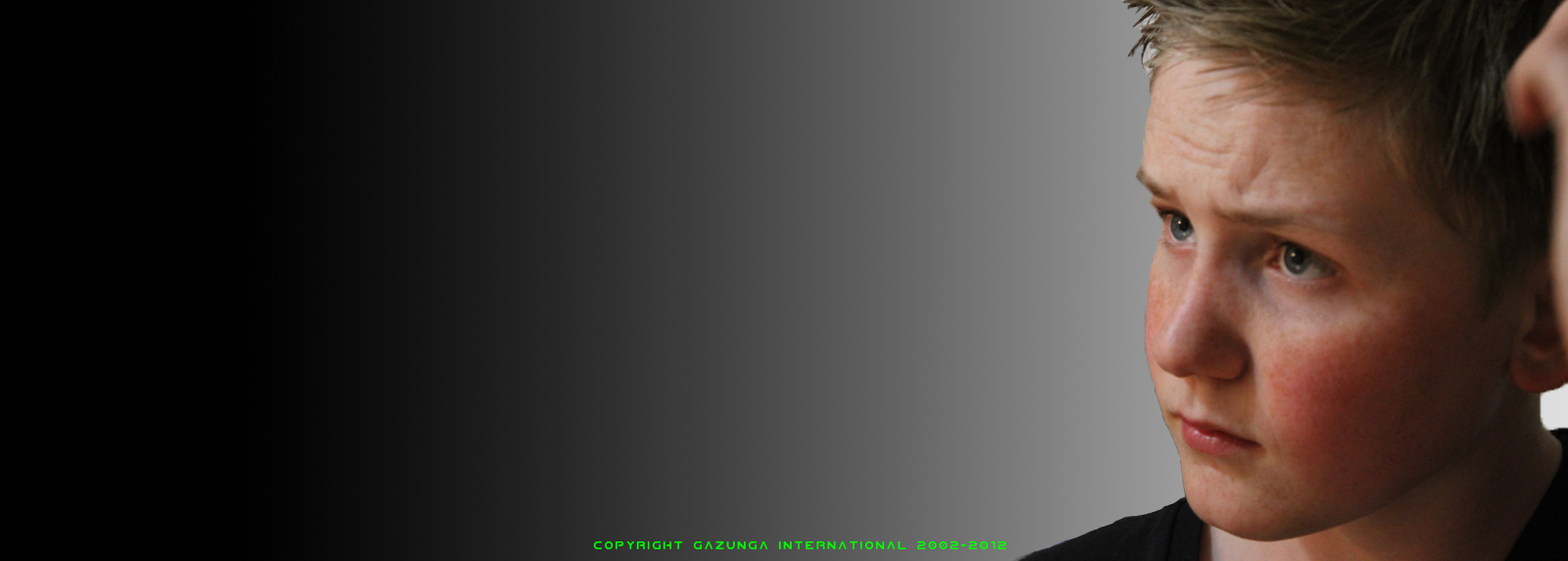
<style>
.page{position:relative;width:1568px;height:561px}
.page>*{position:absolute;margin:0}
.t1{font:9.8px "PlanetNS";letter-spacing:0.2em;color:#00ff00}
</style>
<div class="page">
<p class="t1" style="left:593px;top:540px;width:413px;height:10px">Copyright Gazunga International 2002-2012</p>
</div>
